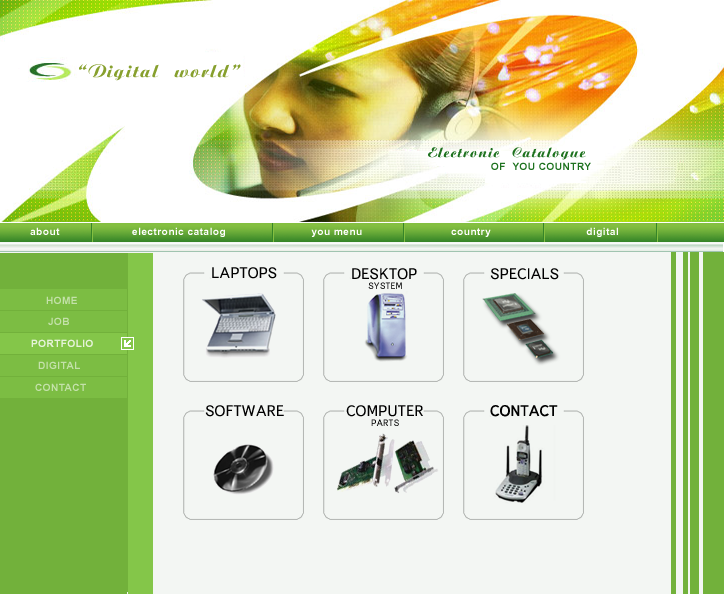
<style>
.page{position:relative;width:724px;height:594px;background:#f3f6f3}
.page>*{position:absolute;margin:0}
.t1{font:18px "BitScript";letter-spacing:0.05em;color:#87a02e}
.t2{font:18px "BitScript";letter-spacing:0.05em;color:#247822}
.t3{font:14px "BitScript";letter-spacing:0.05em;color:#1e721f}
.t4{font:10px "AriagBold";letter-spacing:0.05em;color:#1e721f}
.t5{font:14px "AriagBold";letter-spacing:0.05em;color:#1e721f}
.t6{font:10px "AriagBold";letter-spacing:0.05em;color:#ffffff}
.t7{font:15px "BukvarnayaMedium";color:#000000}
.t8{font:9px "BukvarnayaMedium"}
.t9{font:10px "AriagBold";letter-spacing:0.05em;color:#c4e1aa}
.t10{font:10px "AriagBold";letter-spacing:0.05em;color:#e6f3da}
.t11{font:9px "BukvarnayaMedium";color:#000000}
</style>
<div class="page">
<p class="t1" style="left:79px;top:64px;width:162px;height:17px"><span class="t2"> </span>“Digital world”</p>
<p class="t3" style="left:428px;top:147px;width:158px;height:13px">Electronic Catalogue</p>
<p class="t4" style="left:491px;top:162px;width:100px;height:8px"><span class="t5"> </span>     OF  YOU COUNTRY</p>
<p class="t6" style="left:30px;top:227px;width:588px;height:10px">about                      electronic catalog                          you menu                           country                             digital</p>
<p class="t7" style="left:212px;top:267px;width:65px;height:12px">LAPTOPS</p>
<p class="t7" style="left:352px;top:268px;width:65px;height:12px">DESKTOP</p>
<p class="t7" style="left:490px;top:268px;width:69px;height:12px">SPECIALS</p>
<p class="t8" style="left:368px;top:282px;width:34px;height:7px">SYSTEM</p>
<p class="t9" style="left:46px;top:296px;width:31px;height:8px">HOME</p>
<p class="t9" style="left:48px;top:317px;width:21px;height:8px">JOB</p>
<p class="t10" style="left:31px;top:339px;width:62px;height:8px">PORTFOLIO</p>
<p class="t10" style="left:31px;top:339px;width:62px;height:8px">PORTFOLIO</p>
<p class="t9" style="left:38px;top:361px;width:42px;height:8px">DIGITAL</p>
<p class="t9" style="left:35px;top:383px;width:51px;height:8px">CONTACT</p>
<p class="t7" style="left:205px;top:405px;width:79px;height:12px">SOFTWARE</p>
<p class="t7" style="left:346px;top:405px;width:77px;height:12px">COMPUTER</p>
<p class="t7" style="left:490px;top:405px;width:68px;height:12px">CONTACT</p>
<p class="t11" style="left:371px;top:419px;width:28px;height:7px">PARTS</p>
</div>
